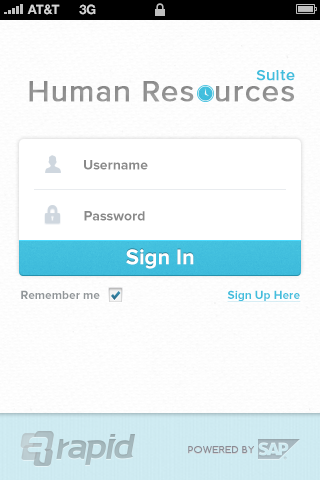
<style>
.page{position:relative;width:320px;height:480px;background:#ffffff}
.page>*{position:absolute;margin:0}
.t1{font:13px "HelveticaNeue-Bold";color:#d4d4d4;text-transform:uppercase}
.t2{font:15px "ProximaNova-Regular";letter-spacing:0.036em;color:#41bedd;font-weight:bold}
.t3{font:30px "ProximaNova-Regular";letter-spacing:0.023em;color:#919191;font-weight:bold}
.t4{font:14px "ProximaNova-Bold";color:#898989}
.t5{font:22px "ProximaNova-Bold";color:#ffffff}
.t6{font:12px "ProximaNova-Bold";color:#919699}
.t7{font:12px "ProximaNova-Bold";color:#41bedd;text-decoration:underline}
.t8{font:9px "Comfortaa";letter-spacing:0.036em;color:#898c96;text-transform:uppercase;scale:1.11 1}
</style>
<div class="page">
<p class="t1" style="left:27px;top:4px;width:33px;height:11px">AT&amp;t</p>
<p class="t1" style="left:79px;top:4px;width:17px;height:11px">3G</p>
<p class="t2" style="left:256px;top:70px;width:39px;height:11px">Suite</p>
<p class="t3" style="left:29px;top:81px;width:265px;height:21px">Human Res  urces</p>
<p class="t4" style="left:84px;top:160px;width:64px;height:10px">Username</p>
<p class="t4" style="left:84px;top:211px;width:61px;height:10px">Password</p>
<p class="t5" style="left:126px;top:249px;width:68px;height:20px">Sign In</p>
<p class="t6" style="left:21px;top:290px;width:79px;height:9px">Remember me</p>
<p class="t7" style="left:227px;top:290px;width:74px;height:12px">Sign Up Here</p>
<p class="t8" style="left:188px;top:446px;width:66px;height:7px">POWERED BY</p>
</div>
